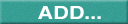
<style>
.page{position:relative;width:128px;height:24px}
.page>*{position:absolute;margin:0}
.t1{font:18px "Helvetica-Bold";color:#ffffff;scale:1.2 1}
</style>
<div class="page">
<p class="t1" style="left:38px;top:6px;width:63px;height:13px">ADD...</p>
</div>
